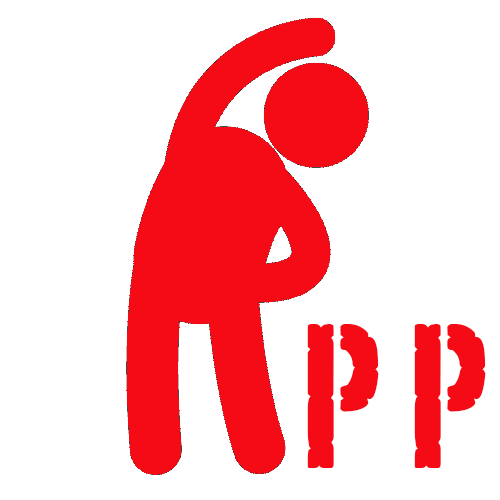
<style>
.page{position:relative;width:500px;height:500px;background:#ffffff}
.page>*{position:absolute;margin:0}
.t1{font:200px "PortagoITCTT";color:#f40b16}
</style>
<div class="page">
<p class="t1" style="left:307px;top:324px;width:179px;height:144px">P P</p>
</div>
